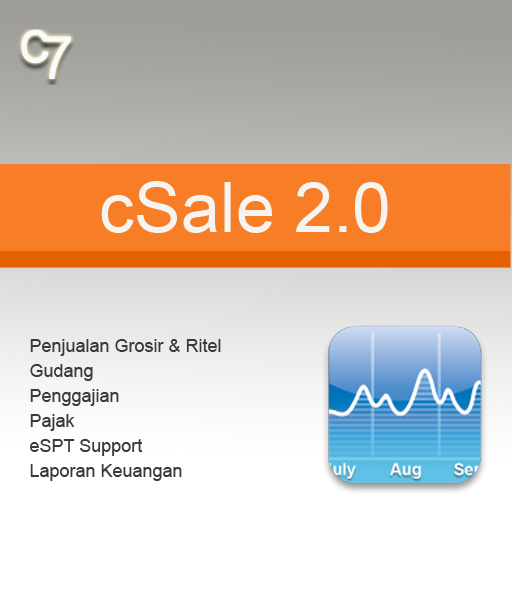
<style>
.page{position:relative;width:512px;height:600px;background:#ffffff}
.page>*{position:absolute;margin:0}
.t1{font:70px "ArialMT";color:#f6f4f0}
.t2{font:18px/25px "ArialMT";color:#3b3a39}
</style>
<div class="page">
<p class="t1" style="left:101px;top:181px;width:287px;height:52px">cSale 2.0</p>
<p class="t2" style="left:30px;top:339px;width:191px;height:142px">Penjualan Grosir &amp; Ritel<br>Gudang<br>Penggajian<br>Pajak<br>eSPT Support<br>Laporan Keuangan</p>
</div>
